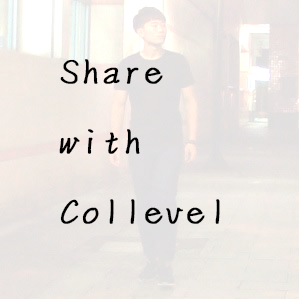
<style>
.page{position:relative;width:299px;height:299px}
.page>*{position:absolute;margin:0}
.t1{font:40px "DFYa-W3-WIN-BF";color:#000000;font-weight:bold}
</style>
<div class="page">
<p class="t1" style="left:59px;top:59px;width:161px;height:165px">Share <br>with<br>Collevel</p>
</div>
